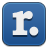
<style>
.page{position:relative;width:48px;height:48px}
.page>*{position:absolute;margin:0}
.t1{font:48px "BookmanOldStyle-Bold";color:#ffffff}
</style>
<div class="page">
<p class="t1" style="left:12px;top:11px;width:27px;height:25px">r.</p>
</div>
